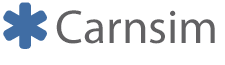
<style>
.page{position:relative;width:225px;height:65px;background:#ffffff}
.page>*{position:absolute;margin:0}
.t1{font:48px "MyriadPro-Regular";color:#626163}
</style>
<div class="page">
<p class="t1" style="left:56px;top:10px;width:159px;height:34px">Carnsim</p>
</div>
